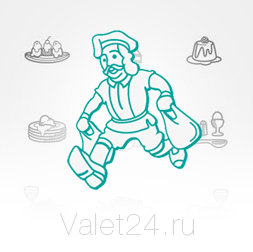
<style>
.page{position:relative;width:253px;height:252px}
.page>*{position:absolute;margin:0}
.t1{font:30px "HelveticaNeueCyr-UltraLight";letter-spacing:0.05em;color:#d8d8d8}
</style>
<div class="page">
<p class="t1" style="left:60px;top:213px;width:134px;height:23px">Valet24.ru</p>
</div>
